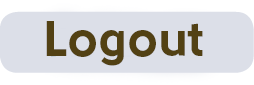
<style>
.page{position:relative;width:254px;height:85px;background:#dcdfe8}
.page>*{position:absolute;margin:0}
.t1{font:50px "Solomon-Sans-Bold";color:#524114}
</style>
<div class="page">
<p class="t1" style="left:46px;top:21px;width:157px;height:45px">Logout</p>
</div>
